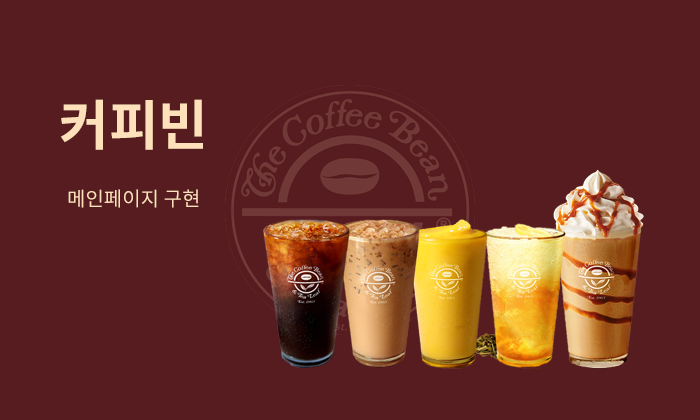
<style>
.page{position:relative;width:700px;height:420px;background:#571c20}
.page>*{position:absolute;margin:0}
.t1{font:54px "NotoSansKR-Bold";color:#fee0ba}
.t2{font:20px "NotoSansKR-Regular";color:#fee0ba}
</style>
<div class="page">
<p class="t1" style="left:60px;top:99px;width:143px;height:51px">커피빈</p>
<p class="t2" style="left:68px;top:189px;width:131px;height:19px">메인페이지 구현</p>
</div>
